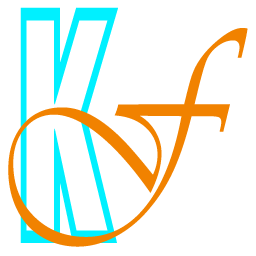
<style>
.page{position:relative;width:256px;height:256px;background:#ffffff}
.page>*{position:absolute;margin:0}
.t1{font:335.2px "STCaiyun";letter-spacing:0.1em;color:#00f0ff;font-weight:bold;scale:0.45 1}
.t2{font:230.8px "Vivaldii";letter-spacing:0.1em;color:#f18200;font-weight:bold;scale:0.82 1}
</style>
<div class="page">
<p class="t1" style="left:20px;top:7px;width:98px;height:236px">K</p>
<p class="t2" style="left:8px;top:28px;width:240px;height:219px">F</p>
</div>
